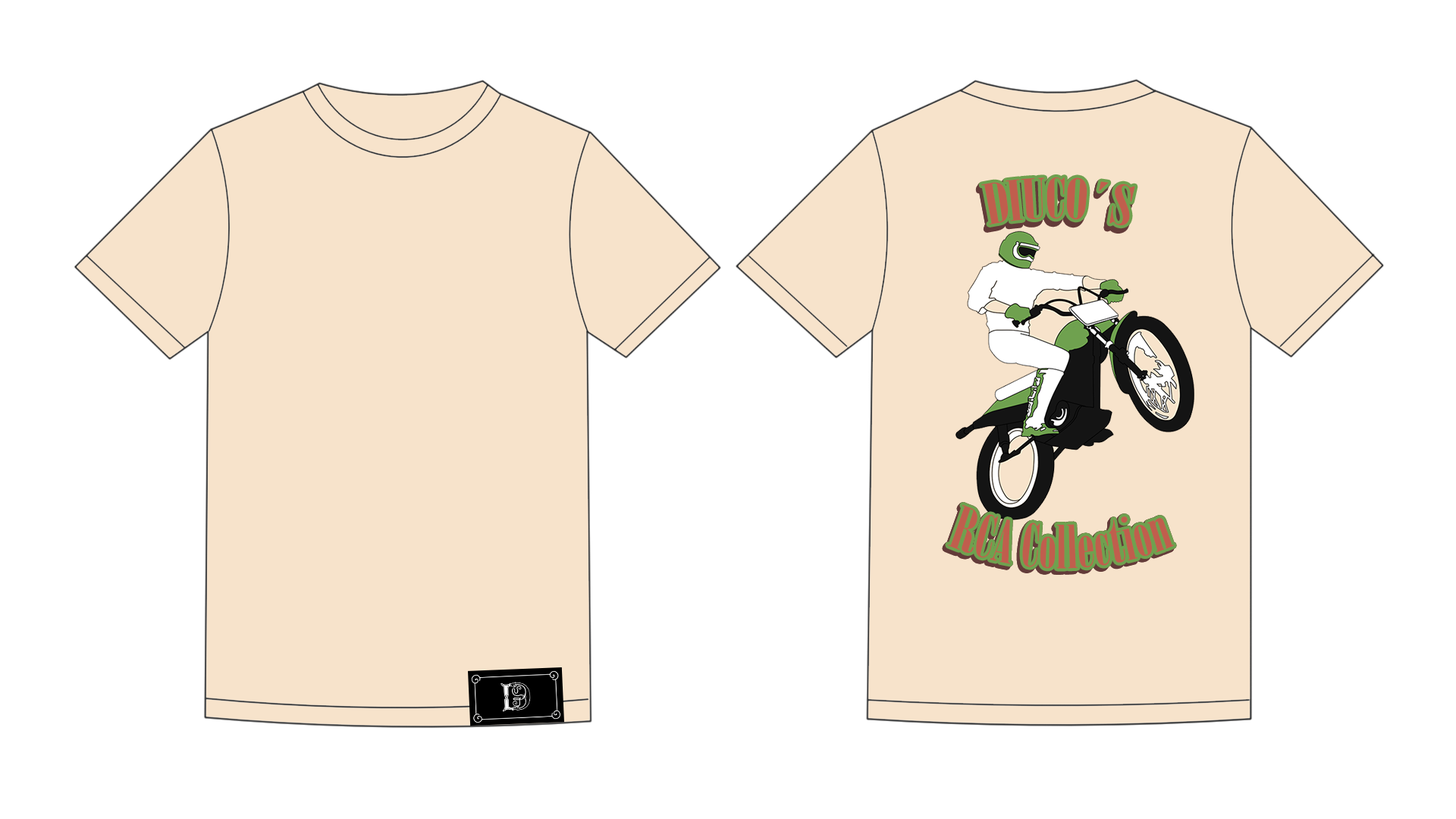
<style>
.page{position:relative;width:1456px;height:819px;background:#ffffff}
.page>*{position:absolute;margin:0}
.t1{font:54.9px "Onyx";color:#c05e4d}
.t2{font:59px "Onyx";scale:0.93 1}
.t3{font:59px "Onyx";color:#c05e4d;scale:0.93 1}
</style>
<div class="page">
<p class="t1" style="left:981px;top:178px;width:153px;height:49px;rotate:1deg">DIUCO´S</p>
<p class="t1" style="left:981px;top:177px;width:154px;height:49px;rotate:1deg">DIUCO´S</p>
<p class="t2" style="left:945px;top:508px;width:226px;height:64px">RCA Collection</p>
<p class="t2" style="left:945px;top:508px;width:226px;height:64px">RCA Collection</p>
<p class="t3" style="left:946px;top:506px;width:226px;height:64px">RCA Collection</p>
<p class="t3" style="left:947px;top:505px;width:226px;height:64px">RCA Collection</p>
<p class="t3" style="left:948px;top:505px;width:226px;height:64px">RCA Collection</p>
<p class="t3" style="left:948px;top:505px;width:226px;height:64px">RCA Collection</p>
</div>
